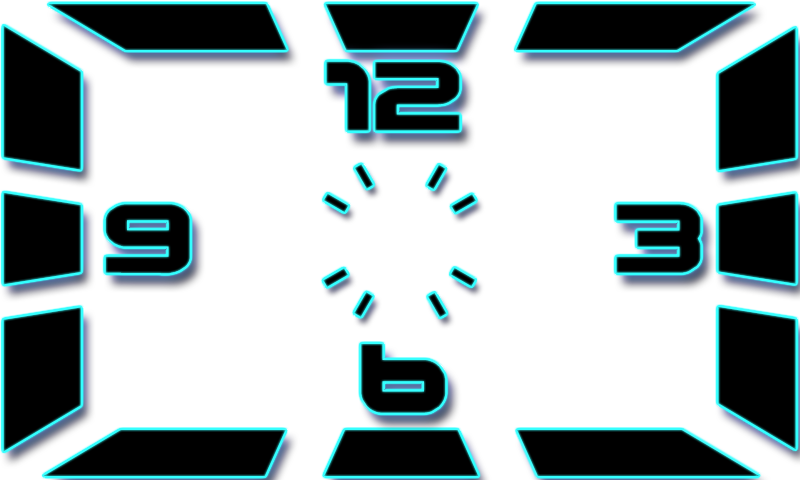
<style>
.page{position:relative;width:800px;height:480px;background:#ffffff}
.page>*{position:absolute;margin:0}
.t1{font:68.6px "namco-regular";color:#000000}
</style>
<div class="page">
<p class="t1" style="left:326px;top:61px;width:134px;height:70px">12</p>
<p class="t1" style="left:105px;top:204px;width:85px;height:70px">9</p>
<p class="t1" style="left:616px;top:204px;width:85px;height:69px">3</p>
<p class="t1" style="left:361px;top:344px;width:85px;height:69px">6</p>
</div>
